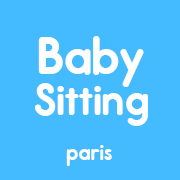
<style>
.page{position:relative;width:180px;height:180px;background:#44bbff}
.page>*{position:absolute;margin:0}
.t1{font:58.3px "Report-Bold";color:#ffffff}
.t2{font:50px "Report-Bold";color:#ffffff}
.t3{font:25px "Report-Bold";color:#ffffff}
</style>
<div class="page">
<p class="t1" style="left:38px;top:36px;width:106px;height:51px">Baby</p>
<p class="t2" style="left:35px;top:83px;width:113px;height:43px">Sitting</p>
<p class="t3" style="left:66px;top:145px;width:46px;height:21px">paris</p>
</div>
